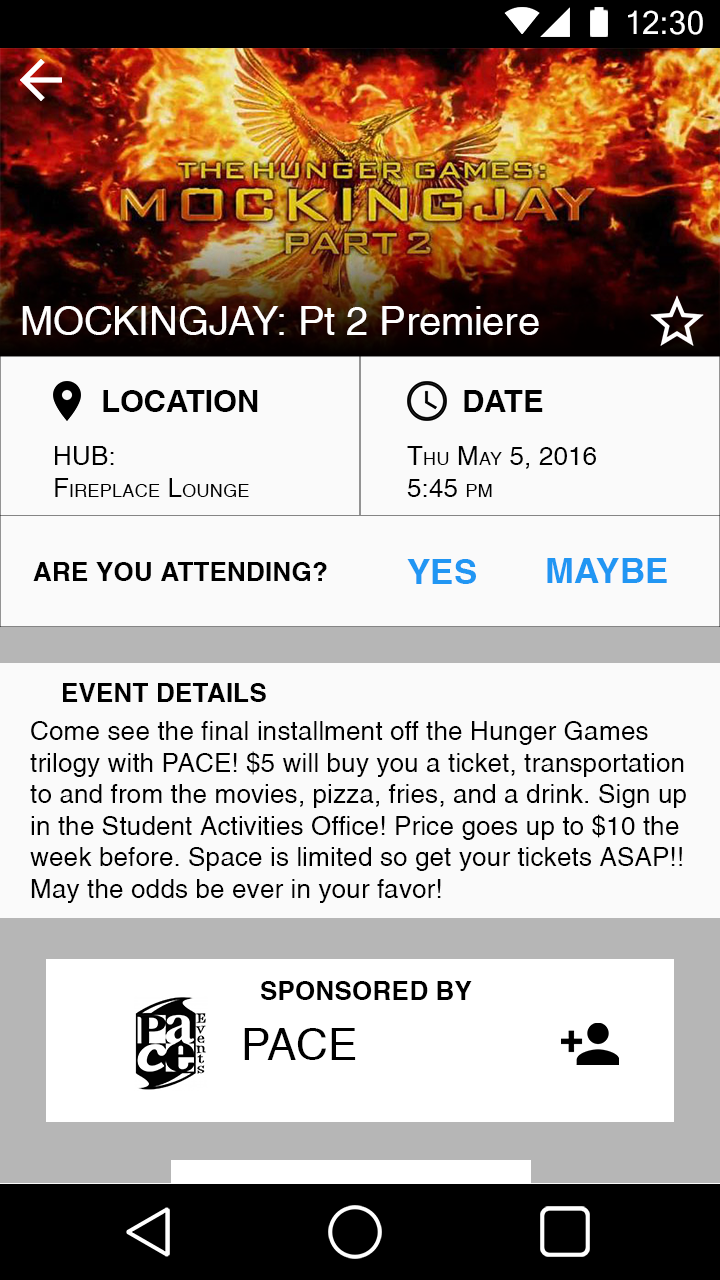
<style>
.page{position:relative;width:720px;height:1280px;background:#fafafa}
.page>*{position:absolute;margin:0}
.t1{font:30.7px "Kartika";color:#ffffff}
.t2{font:39.5px "Helonia";color:#fffefe}
.t3{font:30.7px "Helonia-Bold";color:#000000;font-variant:small-caps}
.t4{font:26.3px "Helonia";color:#000000;font-variant:small-caps}
.t5{font:35.1px "Helonia-Bold";color:#2196f3;font-variant:small-caps}
.t6{font:26.3px "Helonia-Bold";color:#000000;font-variant:small-caps}
.t7{font:26.3px "Helonia";color:#000000}
.t8{font:43.9px "Helonia";color:#000000;font-variant:small-caps}
</style>
<div class="page">
<p class="t1" style="left:628px;top:10px;width:75px;height:25px">12:30</p>
<p class="t2" style="left:22px;top:306px;width:517px;height:29px">MOCKINGJAY: Pt 2 Premiere</p>
<p class="t3" style="left:103px;top:390px;width:155px;height:22px">LOCATION</p>
<p class="t3" style="left:464px;top:390px;width:79px;height:22px">DATE</p>
<p class="t4" style="left:55px;top:446px;width:194px;height:51px">HUB:<br>Fireplace Lounge</p>
<p class="t4" style="left:407px;top:446px;width:189px;height:51px">Thu May 5, 2016<br>5:45 pm</p>
<p class="t5" style="left:547px;top:558px;width:120px;height:25px">MAYBE</p>
<p class="t6" style="left:33px;top:562px;width:294px;height:19px">ARE YOU ATTENDING?</p>
<p class="t5" style="left:407px;top:559px;width:69px;height:25px">YES</p>
<p class="t6" style="left:63px;top:683px;width:203px;height:19px">EVENT DETAILS</p>
<p class="t7" style="left:30px;top:721px;width:656px;height:182px">Come see the final installment off the Hunger Games<br>trilogy with PACE! $5 will buy you a ticket, transportation<br>to and from the movies, pizza, fries, and a drink. Sign up<br>in the Student Activities Office! Price goes up to $10 the<br>week before. Space is limited so get your tickets ASAP!!<br>May the odds be ever in your favor!</p>
<p class="t6" style="left:261px;top:981px;width:211px;height:19px">SPONSORED BY</p>
<p class="t8" style="left:244px;top:1028px;width:112px;height:32px">PACE</p>
</div>
